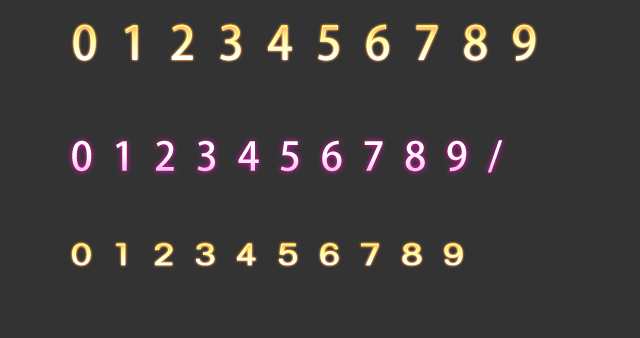
<style>
.page{position:relative;width:640px;height:338px;background:#333333}
.page>*{position:absolute;margin:0}
.t1{font:46px "AdobeHeitiStd-Regular";letter-spacing:0.5em}
.t2{font:39.3px "AdobeHeitiStd-Regular";letter-spacing:0.5em;color:#ffffff}
.t3{font:30px "FZMHJW--GB1-0";letter-spacing:0.5em;scale:1.31 1}
</style>
<div class="page">
<p class="t1" style="left:73px;top:24px;width:463px;height:37px">0123456789</p>
<p class="t2" style="left:72px;top:140px;width:431px;height:33px">0123456789/</p>
<p class="t3" style="left:72px;top:243px;width:391px;height:23px">0123456789</p>
</div>
